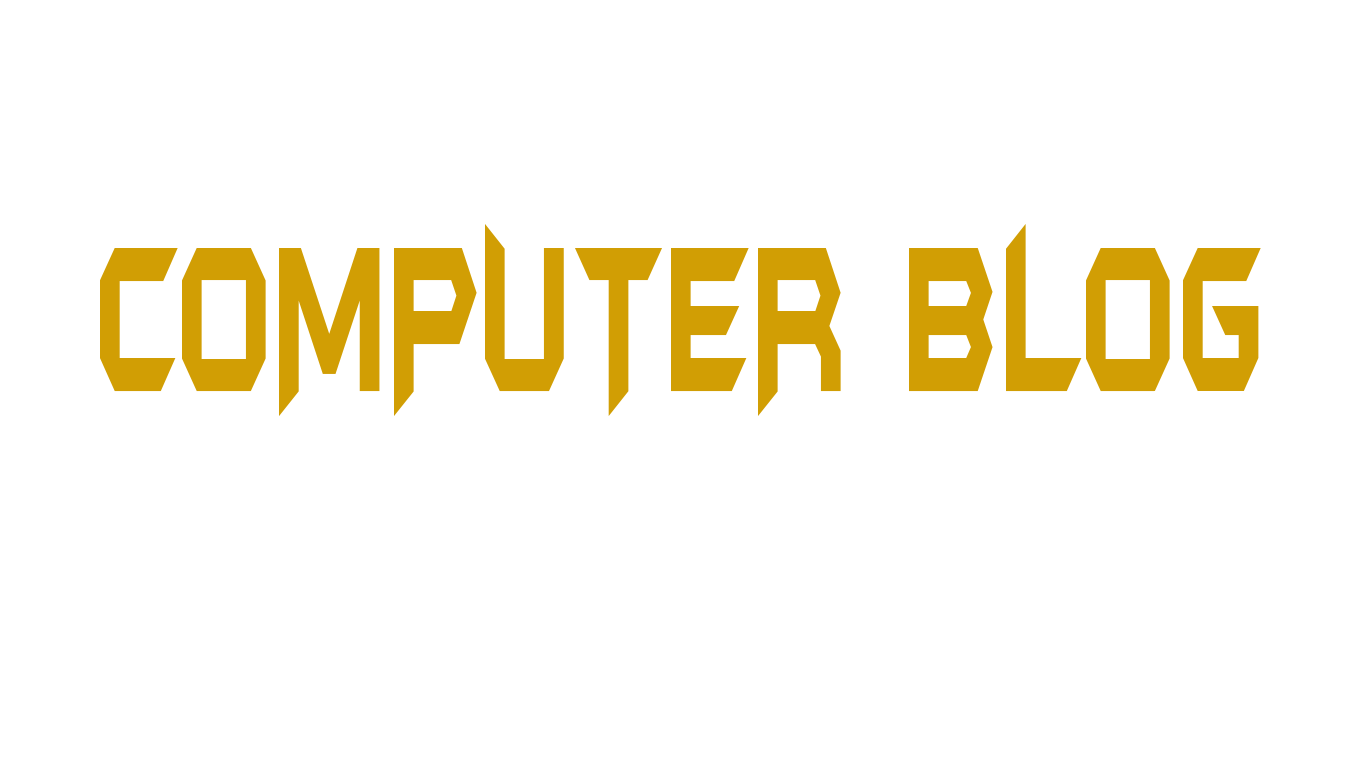
<style>
.page{position:relative;width:1366px;height:768px;background:#ffffff}
.page>*{position:absolute;margin:0}
.t1{font:242.1px "BatmanForeverAlternate";color:#d19e04;scale:0.45 1}
</style>
<div class="page">
<p class="t1" style="left:100px;top:224px;width:1161px;height:192px">COMPUTER BLOG</p>
</div>
